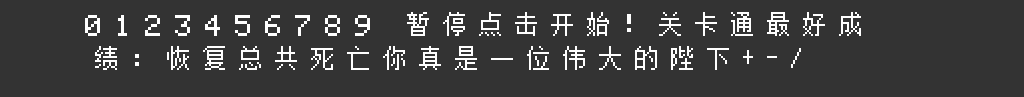
<style>
.page{position:relative;width:1024px;height:97px;background:#333333}
.page>*{position:absolute;margin:0}
.t1{font:24px "Apple";letter-spacing:0.25em;color:#ffffff}
.t2{font:24px/34px "FZXS12--GB1-0";letter-spacing:0.5em;color:#ffffff}
</style>
<div class="page">
<p class="t1" style="left:85px;top:15px;width:285px;height:21px">0123456789</p>
<p class="t2" style="left:95px;top:12px;width:766px;height:58px">暂停点击开始！关卡通最好成<br>绩：恢复总共死亡你真是一位伟大的陛下+-/</p>
</div>
